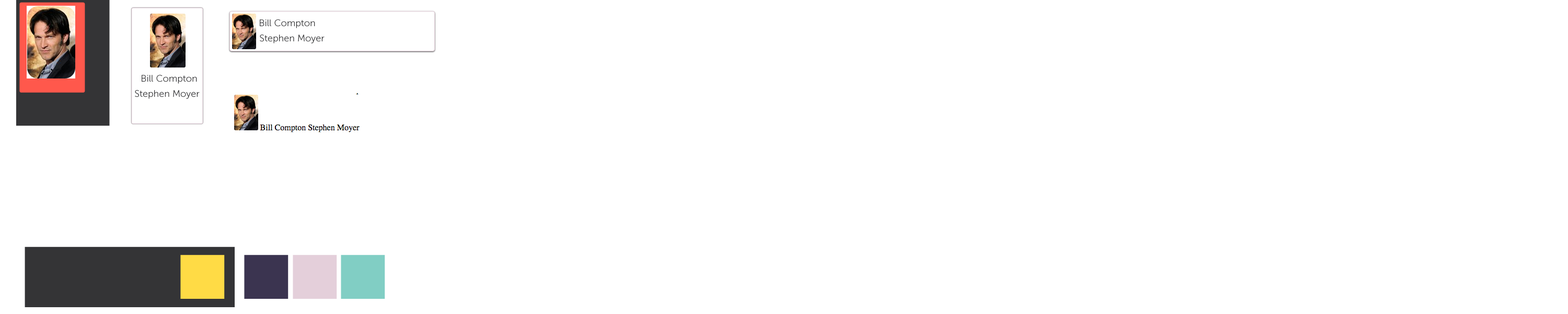
<style>
.page{position:relative;width:1568px;height:314px;background:#ffffff}
.page>*{position:absolute;margin:0}
.t1{font:9.4px "MuseoSans-300";color:#343436}
</style>
<div class="page">
<p class="t1" style="left:260px;top:19px;width:55px;height:9px">Bill Compton</p>
<p class="t1" style="left:260px;top:34px;width:65px;height:9px">Stephen Moyer</p>
<p class="t1" style="left:142px;top:75px;width:55px;height:9px">Bill Compton</p>
<p class="t1" style="left:135px;top:90px;width:65px;height:9px">Stephen Moyer</p>
</div>
